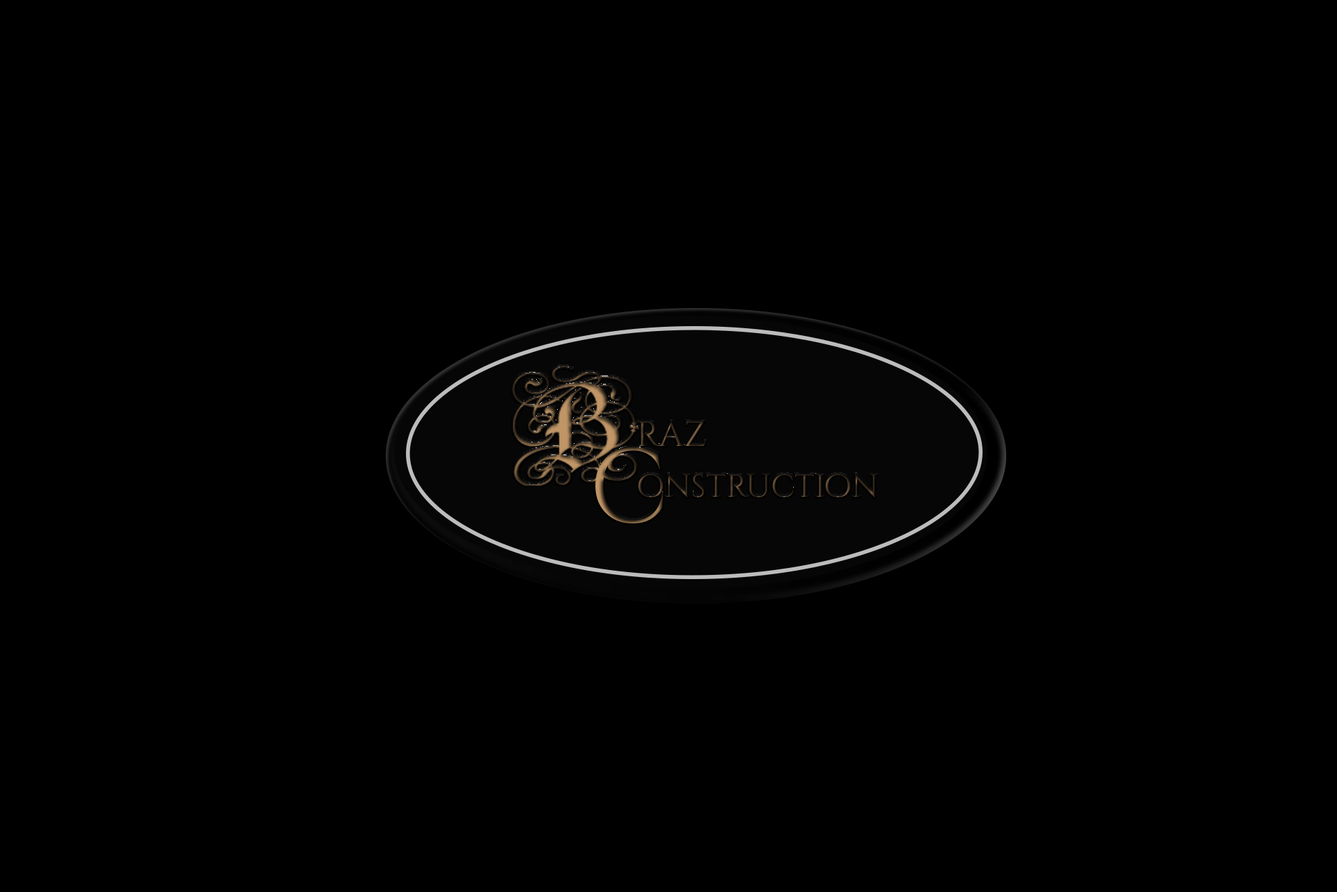
<style>
.page{position:relative;width:1337px;height:892px;background:#000000}
.page>*{position:absolute;margin:0}
.t1{font:34.8px "CinzelDecorative-Regular"}
.t2{font:104.5px "CinzelDecorative-Regular"}
.t3{font:31.9px "CinzelDecorative-Regular"}
</style>
<div class="page">
<p class="t1" style="left:639px;top:421px;width:67px;height:25px">raz</p>
<p class="t2" style="left:596px;top:446px;width:68px;height:78px">c</p>
<p class="t3" style="left:638px;top:474px;width:240px;height:23px">onstruction</p>
</div>
